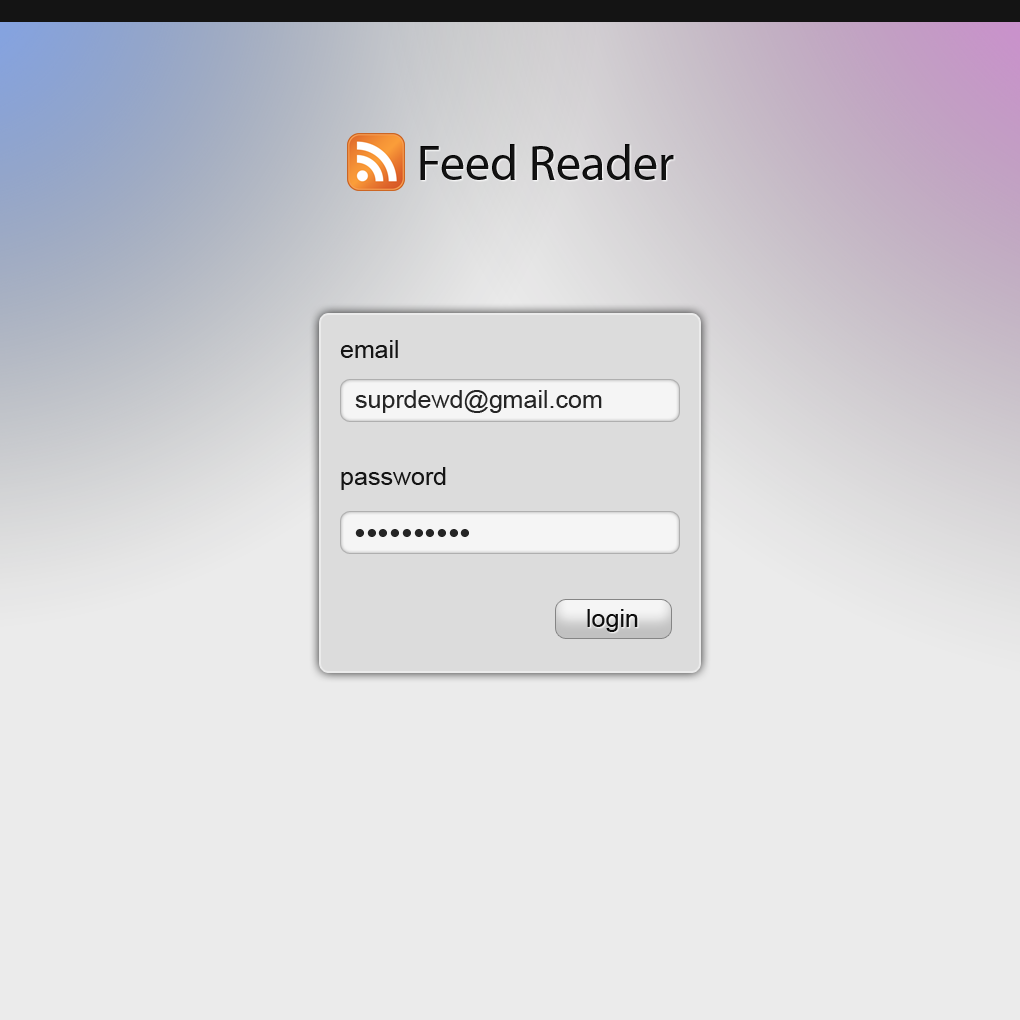
<style>
.page{position:relative;width:1020px;height:1020px;background:#ebebeb}
.page>*{position:absolute;margin:0}
.t1{font:50px "MyriadPro-Regular";color:#141414}
.t2{font:25px "ArialMT";color:#141414}
.t3{font:25px "ArialMT";color:#252525}
.t4{font:50px "MicrosoftHimalaya";color:#252525}
</style>
<div class="page">
<p class="t1" style="left:420px;top:144px;width:254px;height:36px">Feed Reader</p>
<p class="t2" style="left:340px;top:340px;width:58px;height:18px">email</p>
<p class="t3" style="left:355px;top:390px;width:247px;height:23px">suprdewd@gmail.com</p>
<p class="t2" style="left:341px;top:467px;width:105px;height:23px">password</p>
<p class="t4" style="left:355px;top:529px;width:114px;height:8px">••••••••••</p>
<p class="t2" style="left:587px;top:609px;width:51px;height:23px">login</p>
</div>
